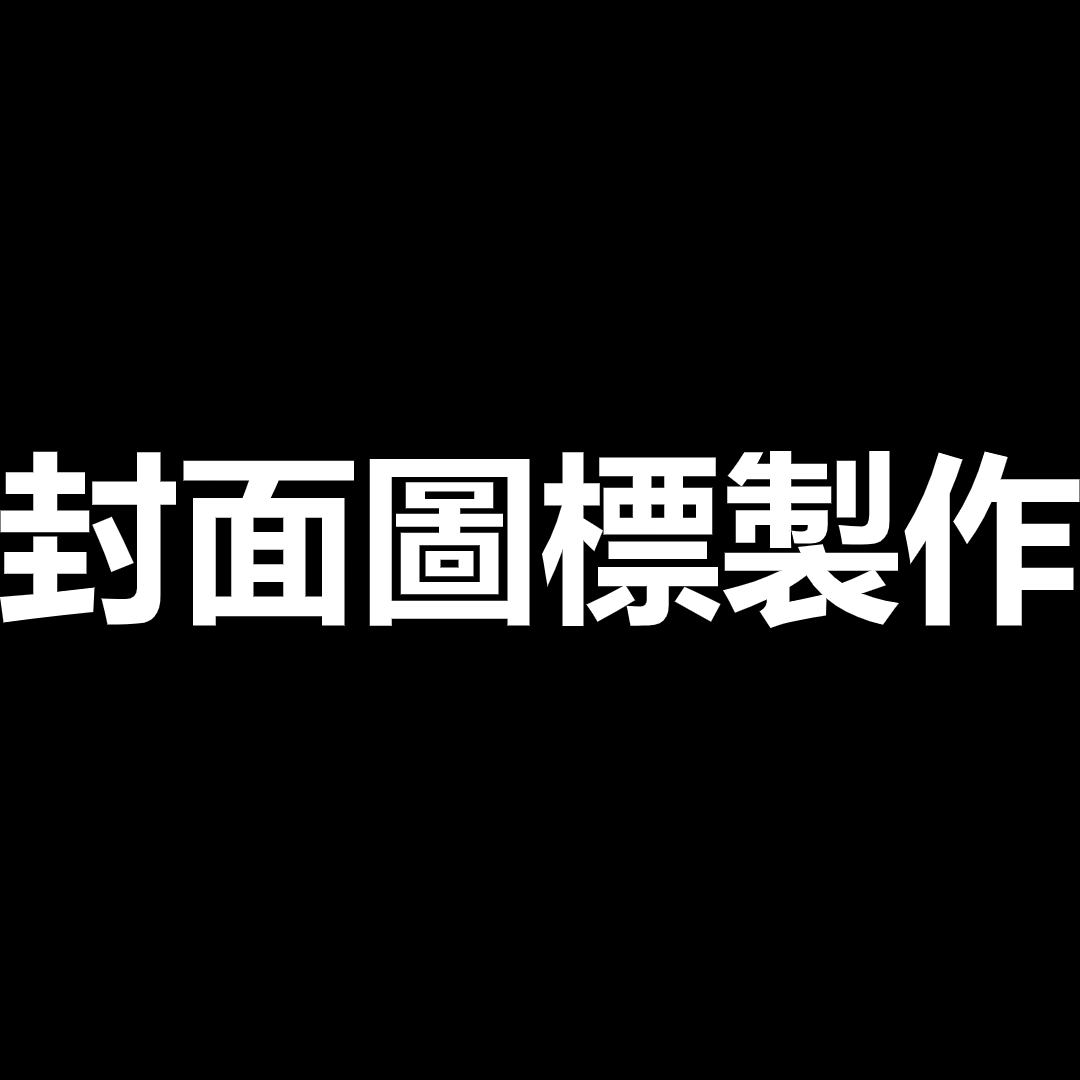
<style>
.page{position:relative;width:1080px;height:1080px;background:#000000}
.page>*{position:absolute;margin:0}
.t1{font:180.8px "MicrosoftYaHei";color:#ffffff}
</style>
<div class="page">
<p class="t1" style="left:0px;top:451px;width:1080px;height:177px">封面圖標製作</p>
</div>
